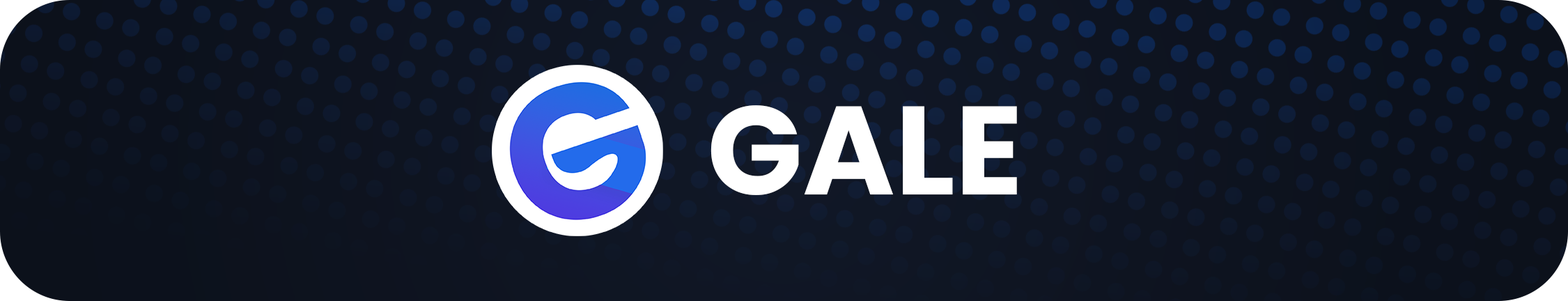
<style>
.page{position:relative;width:1568px;height:301px}
.page>*{position:absolute;margin:0}
.t1{font:125.4px "Poppins-Bold";color:#ffffff}
</style>
<div class="page">
<p class="t1" style="left:711px;top:105px;width:306px;height:90px">GALE</p>
</div>
